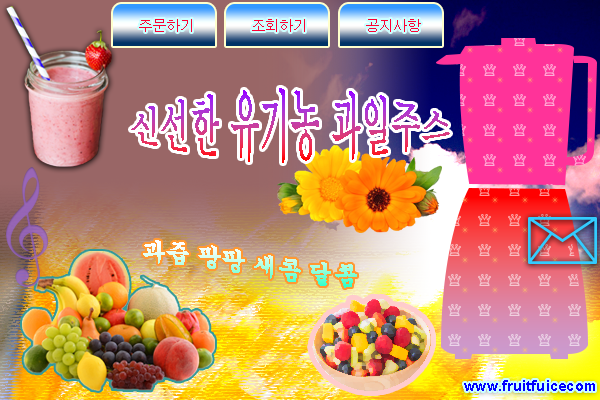
<style>
.page{position:relative;width:600px;height:400px}
.page>*{position:absolute;margin:0}
.t1{font:14px "Dotum";color:#ff0033}
.t2{font:30px "Batang"}
.t3{font:24px "Gungsuh"}
.t4{font:15px "Arial-BoldMT";color:#0000ff}
</style>
<div class="page">
<p class="t1" style="left:139px;top:19px;width:53px;height:13px">주문하기</p>
<p class="t1" style="left:252px;top:19px;width:53px;height:13px">조회하기</p>
<p class="t1" style="left:366px;top:19px;width:55px;height:13px">공지사항</p>
<p class="t2" style="left:131px;top:88px;width:319px;height:75px">신선한 유기농 과일주스</p>
<p class="t3" style="left:143px;top:240px;width:214px;height:48px">과즙 팡팡 새콤 달콤</p>
<p class="t4" style="left:464px;top:380px;width:131px;height:11px">www.fruitfuicecom</p>
</div>
